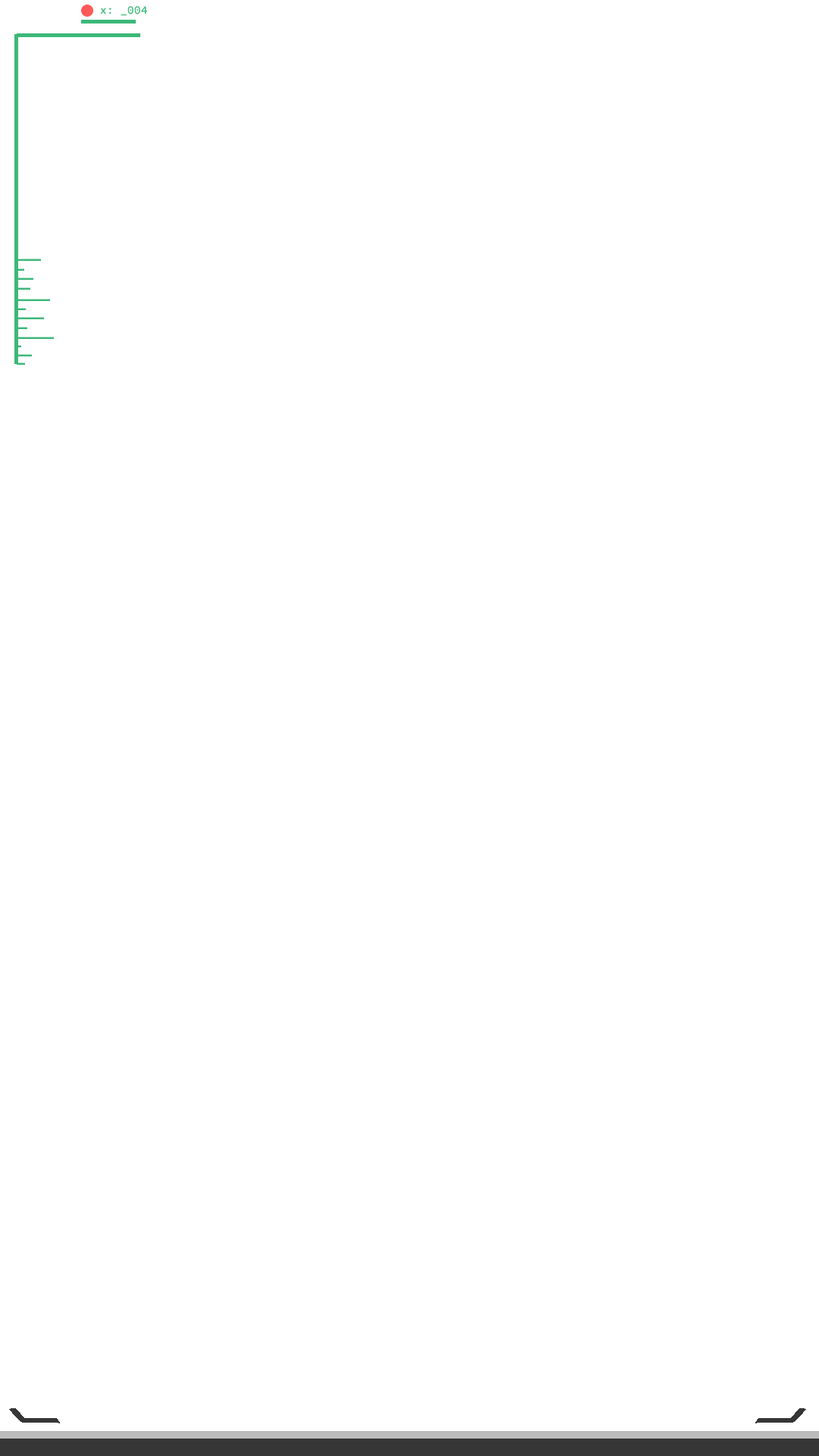
<style>
.page{position:relative;width:819px;height:1456px;background:#ffffff}
.page>*{position:absolute;margin:0}
.t1{font:11.4px "SourceCodeVariable-Roman";color:#3cb878}
</style>
<div class="page">
<p class="t1" style="left:100px;top:6px;width:47px;height:10px">x: _004</p>
</div>
